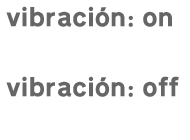
<style>
.page{position:relative;width:190px;height:140px;background:#ffffff}
.page>*{position:absolute;margin:0}
.t1{font:26px "Transport-Heavy-Regular";color:#666666}
</style>
<div class="page">
<p class="t1" style="left:6px;top:6px;width:166px;height:21px">vibración: on</p>
<p class="t1" style="left:6px;top:76px;width:173px;height:21px">vibración: off</p>
</div>
